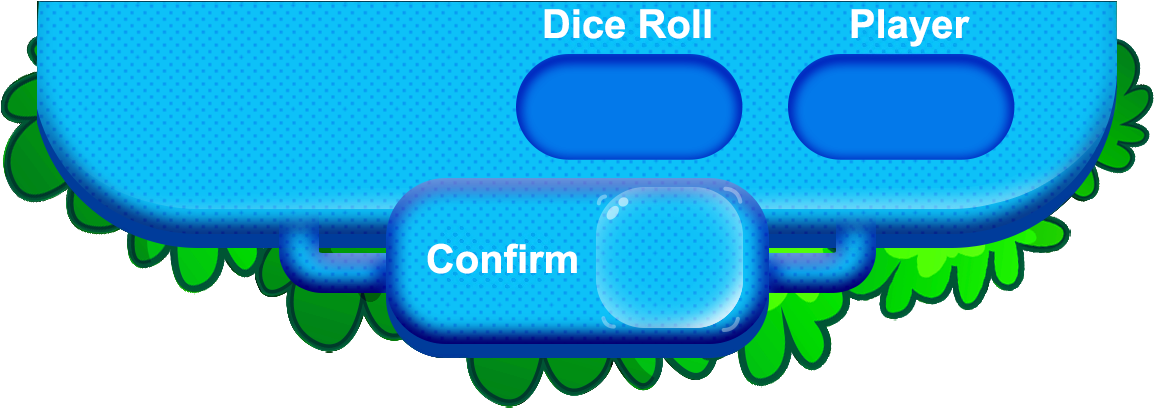
<style>
.page{position:relative;width:1155px;height:409px;background:#ffffff}
.page>*{position:absolute;margin:0}
.t1{font:40px "Arial-BoldMT";color:#ffffff}
</style>
<div class="page">
<p class="t1" style="left:544px;top:9px;width:167px;height:30px">Dice Roll</p>
<p class="t1" style="left:851px;top:9px;width:119px;height:38px">Player</p>
<p class="t1" style="left:427px;top:243px;width:150px;height:31px">Confirm</p>
</div>
